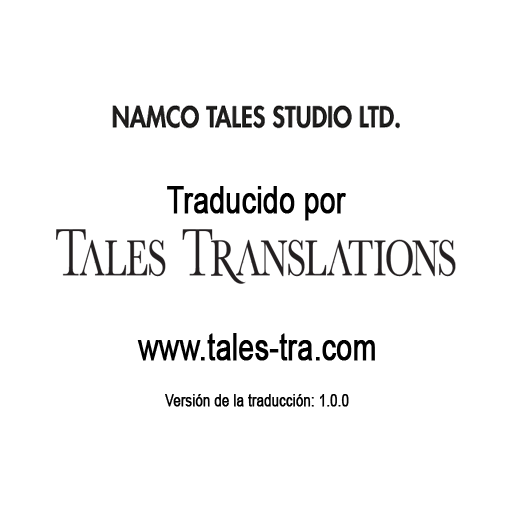
<style>
.page{position:relative;width:512px;height:512px;background:#ffffff}
.page>*{position:absolute;margin:0}
.t1{font:36.9px "ArialMT";color:#000000;font-weight:bold;scale:0.75 1}
.t2{font:17.2px "ArialMT";color:#000000;font-weight:bold;scale:0.75 1}
</style>
<div class="page">
<p class="t1" style="left:167px;top:186px;width:179px;height:35px">Traducido por</p>
<p class="t1" style="left:137px;top:333px;width:238px;height:28px">www.tales-tra.com</p>
<p class="t2" style="left:165px;top:394px;width:184px;height:13px">Versión de la traducción: 1.0.0</p>
</div>
